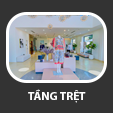
<style>
.page{position:relative;width:113px;height:113px;background:#333333}
.page>*{position:absolute;margin:0}
.t1{font:11.8px "MyriadPro-Bold";color:#ffffff;text-transform:uppercase}
</style>
<div class="page">
<p class="t1" style="left:28px;top:89px;width:58px;height:14px">Tầng Trệt</p>
</div>
